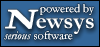
<style>
.page{position:relative;width:100px;height:47px}
.page>*{position:absolute;margin:0}
.t1{font:12px "Garamond";color:#ffffff}
.t2{font:24px "Garamond-Bold";color:#ffffff}
.t3{font:28.8px "Garamond-Bold";color:#ffffff;text-transform:uppercase;font-weight:bold;font-style:italic;scale:1.25 1}
.t4{font:12px "Garamond-Italic";color:#ffffff}
</style>
<div class="page">
<p class="t1" style="left:40px;top:4px;width:54px;height:11px">powered by</p>
<p class="t1" style="left:40px;top:4px;width:54px;height:11px;opacity:0.5">powered by</p>
<p class="t2" style="left:5px;top:9px;width:89px;height:25px"><span class="t3">n</span>ewsys</p>
<p class="t1" style="left:4px;top:31px;width:69px;height:9px"><span class="t4">serious</span> software</p>
<p class="t1" style="left:4px;top:31px;width:69px;height:9px;opacity:0.5"><span class="t4">serious</span> software</p>
</div>
